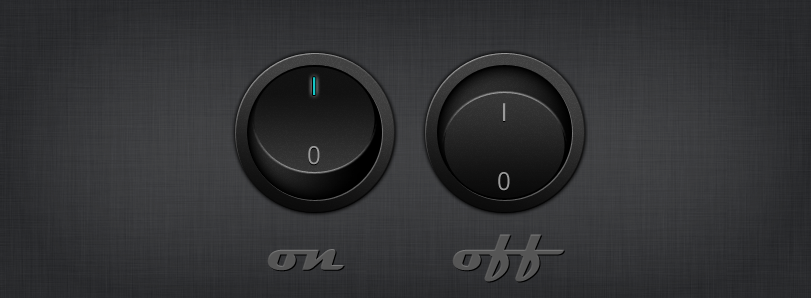
<style>
.page{position:relative;width:811px;height:298px}
.page>*{position:absolute;margin:0}
.t1{font:24px "Kartika";color:#14c7c7}
.t2{font:24px "Kartika";color:#999999}
.t3{font:60px "Magneto-Bold";color:#565656}
.t4{font:60px "Magneto-Bold";color:#555555}
</style>
<div class="page">
<p class="t1" style="left:313px;top:77px;width:3px;height:18px">I</p>
<p class="t2" style="left:503px;top:103px;width:3px;height:18px">I</p>
<p class="t2" style="left:308px;top:146px;width:12px;height:19px">0</p>
<p class="t2" style="left:498px;top:172px;width:12px;height:19px">0</p>
<p class="t3" style="left:452px;top:234px;width:112px;height:48px">off</p>
<p class="t4" style="left:267px;top:249px;width:77px;height:22px">on</p>
</div>
